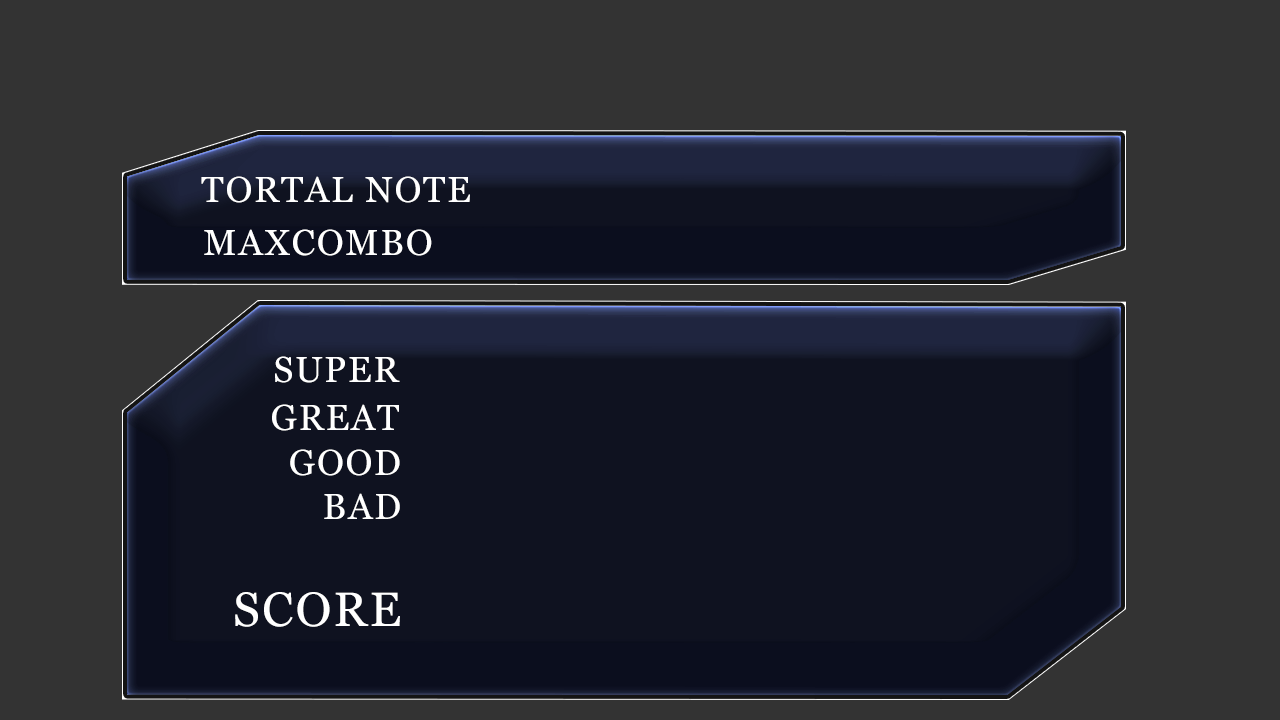
<style>
.page{position:relative;width:1280px;height:720px;background:#333333}
.page>*{position:absolute;margin:0}
.t1{font:36px "Vani";letter-spacing:0.05em;color:#ffffff}
.t2{font:48px "Vani";letter-spacing:0.05em;color:#ffffff}
</style>
<div class="page">
<p class="t1" style="left:201px;top:176px;width:269px;height:27px">TORTAL NOTE</p>
<p class="t1" style="left:204px;top:229px;width:228px;height:27px">MAXCOMBO</p>
<p class="t1" style="left:275px;top:356px;width:125px;height:27px">SUPER</p>
<p class="t1" style="left:272px;top:404px;width:127px;height:27px">GREAT</p>
<p class="t1" style="left:290px;top:449px;width:110px;height:27px">GOOD</p>
<p class="t1" style="left:324px;top:493px;width:76px;height:26px">BAD</p>
<p class="t2" style="left:235px;top:592px;width:165px;height:35px">SCORE</p>
</div>
